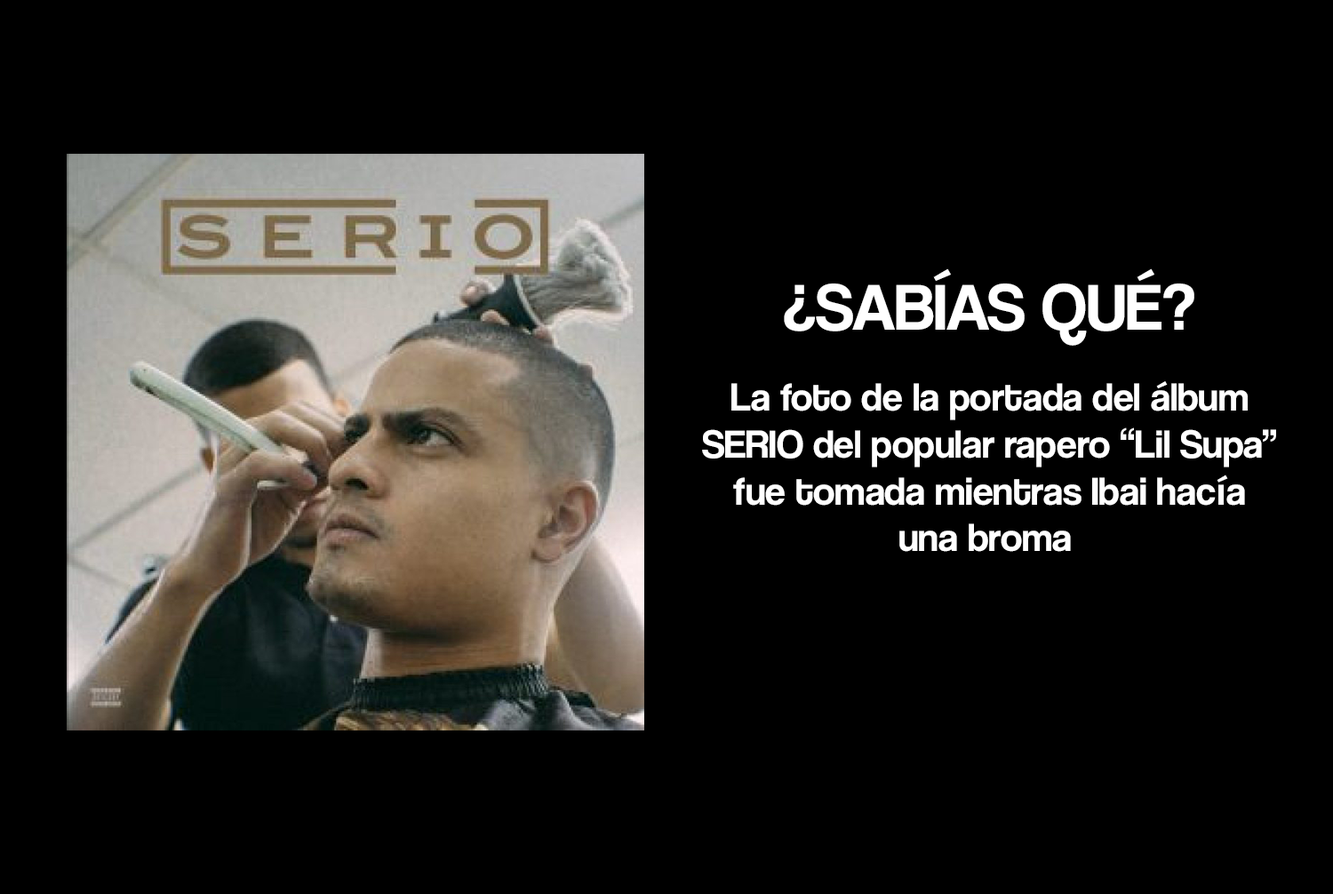
<style>
.page{position:relative;width:1333px;height:894px;background:#000000}
.page>*{position:absolute;margin:0}
.t1{font:67.3px "CoolveticaRg-Regular";color:#ffffff}
.t2{font:40.1px "CoolveticaRg-Regular";color:#ffffff}
</style>
<div class="page">
<p class="t1" style="left:784px;top:268px;width:411px;height:78px">¿SABÍAS QUÉ?</p>
<p class="t2" style="left:702px;top:381px;width:575px;height:171px;text-align:center">La foto de la portada del álbum<br>SERIO del popular rapero “Lil Supa”<br>fue tomada mientras Ibai hacía<br>una broma</p>
</div>
